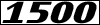
<style>
.page{position:relative;width:100px;height:25px;background:#000000}
.page>*{position:absolute;margin:0}
.t1{font:48px "Motorwerk";color:#000000}
</style>
<div class="page">
<p class="t1" style="left:2px;top:1px;width:95px;height:23px">1500</p>
</div>
